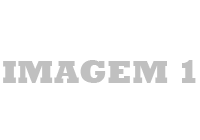
<style>
.page{position:relative;width:200px;height:140px;background:#ffffff}
.page>*{position:absolute;margin:0}
.t1{font:33.3px "Rockwell-ExtraBold";color:#c0c0c0}
</style>
<div class="page">
<p class="t1" style="left:3px;top:60px;width:193px;height:23px">IMAGEM 1</p>
</div>
